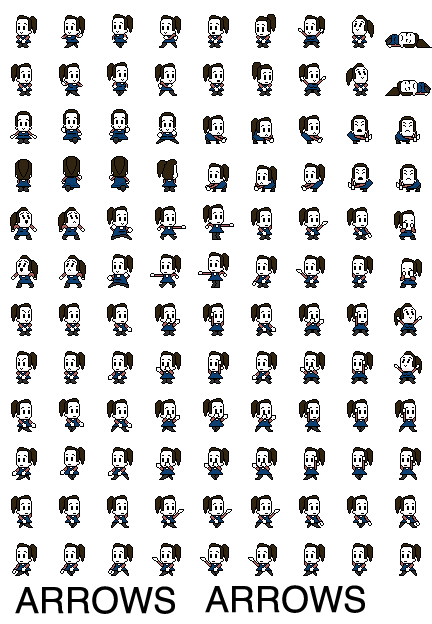
<style>
.page{position:relative;width:432px;height:624px;background:#ffffff}
.page>*{position:absolute;margin:0}
.t1{font:36px "Helvetica";color:#000000}
</style>
<div class="page">
<p class="t1" style="left:15px;top:586px;width:160px;height:28px">ARROWS</p>
<p class="t1" style="left:205px;top:585px;width:160px;height:28px">ARROWS</p>
</div>
